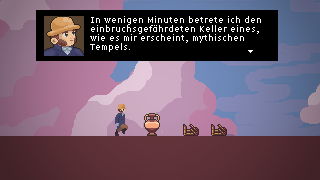
<style>
.page{position:relative;width:320px;height:180px}
.page>*{position:absolute;margin:0}
.t1{font:9px/9px "LoRes9OT-NarrowRegular";color:#ffffff}
</style>
<div class="page">
<p class="t1" style="left:90px;top:16px;width:171px;height:36px">In wenigen Minuten betrete ich den einbruchsgefährdeten Keller eines, wie es mir erscheint, mythischen Tempels.</p>
</div>
